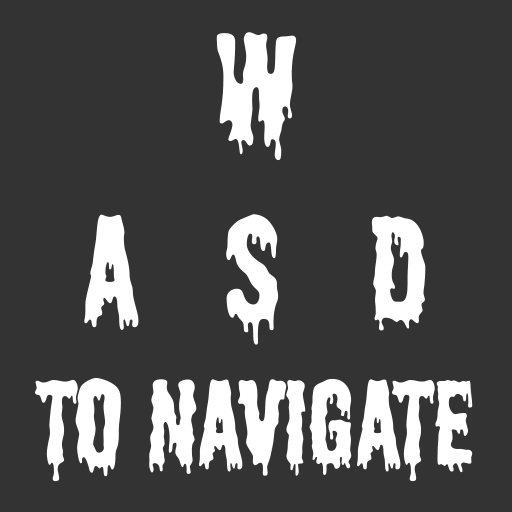
<style>
.page{position:relative;width:512px;height:512px;background:#333333}
.page>*{position:absolute;margin:0}
.t1{font:150px "Shlop-Regular";color:#ffffff}
.t2{font:120px "Shlop-Regular";color:#ffffff}
</style>
<div class="page">
<p class="t1" style="left:35px;top:32px;width:438px;height:450px;text-align:center">W<br>A   S   D<br><span class="t2">to navigate</span></p>
</div>
